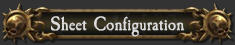
<style>
.page{position:relative;width:235px;height:45px;background:#333333}
.page>*{position:absolute;margin:0}
.t1{font:20px "CaslonAntique";color:#dcdcdc}
</style>
<div class="page">
<p class="t1" style="left:51px;top:16px;width:134px;height:21px">Sheet Configuration</p>
</div>
